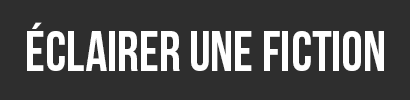
<style>
.page{position:relative;width:410px;height:100px;background:#2e2e2e}
.page>*{position:absolute;margin:0}
.t1{font:57px "BebasNeue";color:#ffffff;scale:0.95 1}
</style>
<div class="page">
<p class="t1" style="left:27px;top:22px;width:357px;height:49px">éclairer une fiction</p>
</div>
